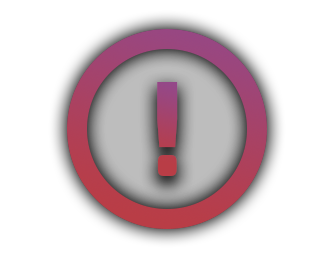
<style>
.page{position:relative;width:334px;height:258px;background:#ffffff}
.page>*{position:absolute;margin:0}
.t1{font:135.2px "Exo2-Bold"}
</style>
<div class="page">
<p class="t1" style="left:157px;top:82px;width:21px;height:94px">!</p>
</div>
